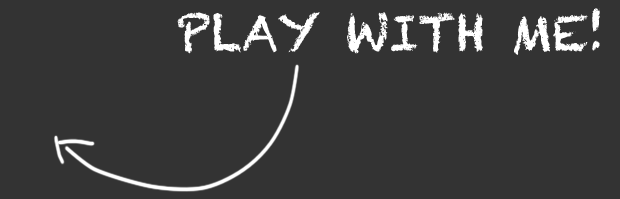
<style>
.page{position:relative;width:620px;height:199px;background:#333333}
.page>*{position:absolute;margin:0}
.t1{font:49px "Chalkduster";color:#ffffff}
</style>
<div class="page">
<p class="t1" style="left:177px;top:8px;width:423px;height:47px">PLAY WITH ME!</p>
</div>
